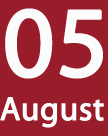
<style>
.page{position:relative;width:108px;height:136px;background:#991c2a}
.page>*{position:absolute;margin:0}
.t1{font:100px "MyriadPro-Regular";color:#fdfcfc;font-weight:bold}
.t2{font:33.3px "MyriadPro-Regular";color:#fefdfd;font-weight:bold}
</style>
<div class="page">
<p class="t1" style="left:5px;top:8px;width:98px;height:71px">05</p>
<p class="t2" style="left:0px;top:97px;width:104px;height:31px">August</p>
</div>
